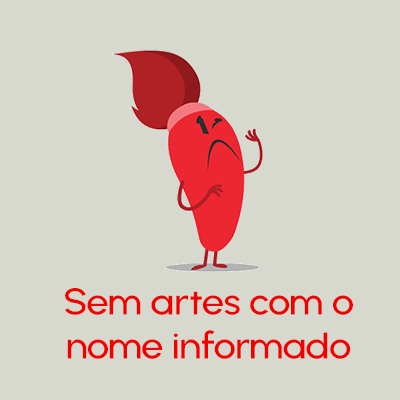
<style>
.page{position:relative;width:400px;height:400px;background:#d7d9ce}
.page>*{position:absolute;margin:0}
.t1{font:37.2px/44px "Urbanist-SemiBold";letter-spacing:-0.02em;color:#f20000;scale:1.08 1}
</style>
<div class="page">
<p class="t1" style="left:65px;top:288px;width:288px;height:71px;text-align:center">Sem artes com o<br>nome informado</p>
</div>
